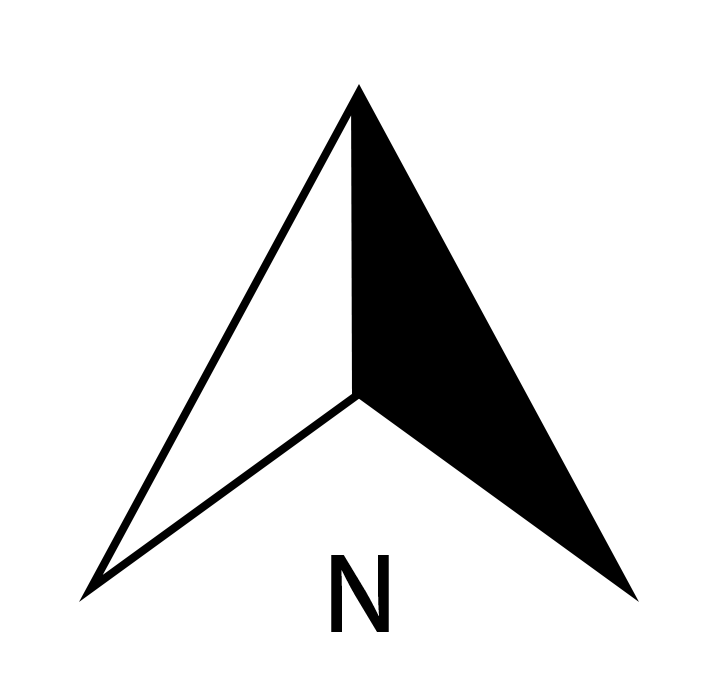
<style>
.page{position:relative;width:716px;height:686px;background:#ffffff}
.page>*{position:absolute;margin:0}
.t1{font:100px "AdobeHeitiStd-Regular";color:#000000}
</style>
<div class="page">
<p class="t1" style="left:331px;top:555px;width:58px;height:77px">N</p>
</div>
